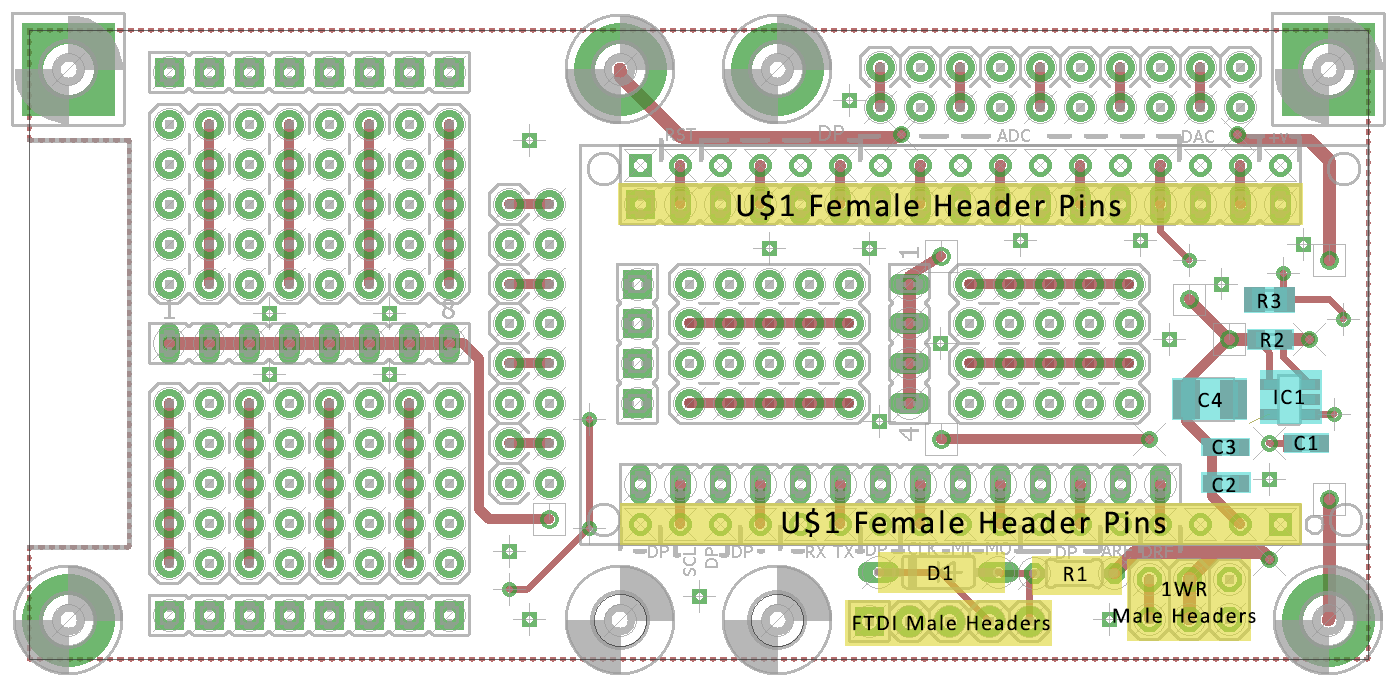
<style>
.page{position:relative;width:1398px;height:690px;background:#ffffff}
.page>*{position:absolute;margin:0}
.t1{font:22.2px "Calibri";letter-spacing:0.08em;color:#000000}
</style>
<div class="page">
<p class="t1" style="left:1258px;top:293px;width:23px;height:16px">R3</p>
<p class="t1" style="left:1261px;top:332px;width:23px;height:16px">R2</p>
<p class="t1" style="left:1274px;top:389px;width:30px;height:16px">IC1</p>
<p class="t1" style="left:1198px;top:392px;width:24px;height:16px">C4</p>
<p class="t1" style="left:1294px;top:435px;width:24px;height:16px">C1</p>
<p class="t1" style="left:1212px;top:439px;width:24px;height:16px">C3</p>
<p class="t1" style="left:1212px;top:477px;width:24px;height:16px">C2</p>
<p class="t1" style="left:928px;top:565px;width:25px;height:15px">D1</p>
<p class="t1" style="left:1064px;top:566px;width:23px;height:16px">R1</p>
<p class="t1" style="left:1113px;top:581px;width:143px;height:42px;text-align:center">1WR<br>Male Headers</p>
<p class="t1" style="left:853px;top:614px;width:197px;height:17px">FTDI Male Headers</p>
</div>
